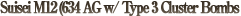
<style>
.page{position:relative;width:241px;height:16px;background:#ffffff}
.page>*{position:absolute;margin:0}
.t1{font:16px "RyuminPro-ExBold";letter-spacing:-0.12em;color:#4a3f32;font-weight:bold;scale:0.85 1}
</style>
<div class="page">
<p class="t1" style="left:0px;top:0px;width:240px;height:17px">Suisei M12 (634 AG w/ Type 3 Cluster Bombs</p>
</div>
